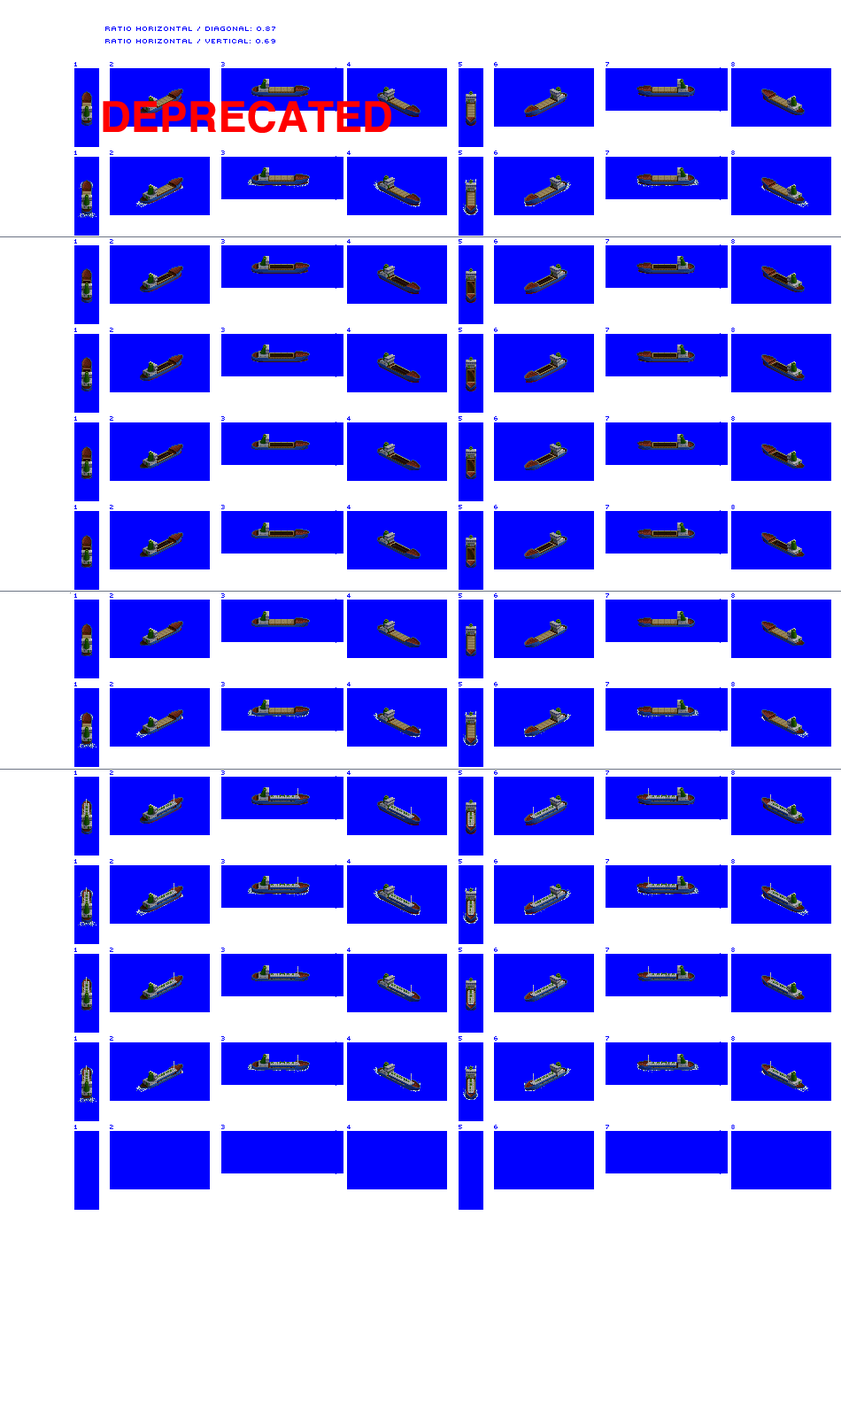
<style>
.page{position:relative;width:841px;height:1417px;background:#ffffff}
.page>*{position:absolute;margin:0}
.t1{font:8.9px/12.4px "Mini7";color:#0000ff}
.t2{font:42.5px "Helvetica-Bold";color:#ff0000}
</style>
<div class="page">
<p class="t1" style="left:105px;top:27px;width:170px;height:16px">ratio horizontal / diagonal: 0.87<br>Ratio horizontal / vertical: 0.69</p>
<p class="t2" style="left:103px;top:100px;width:288px;height:33px">DEPRECATED</p>
</div>
